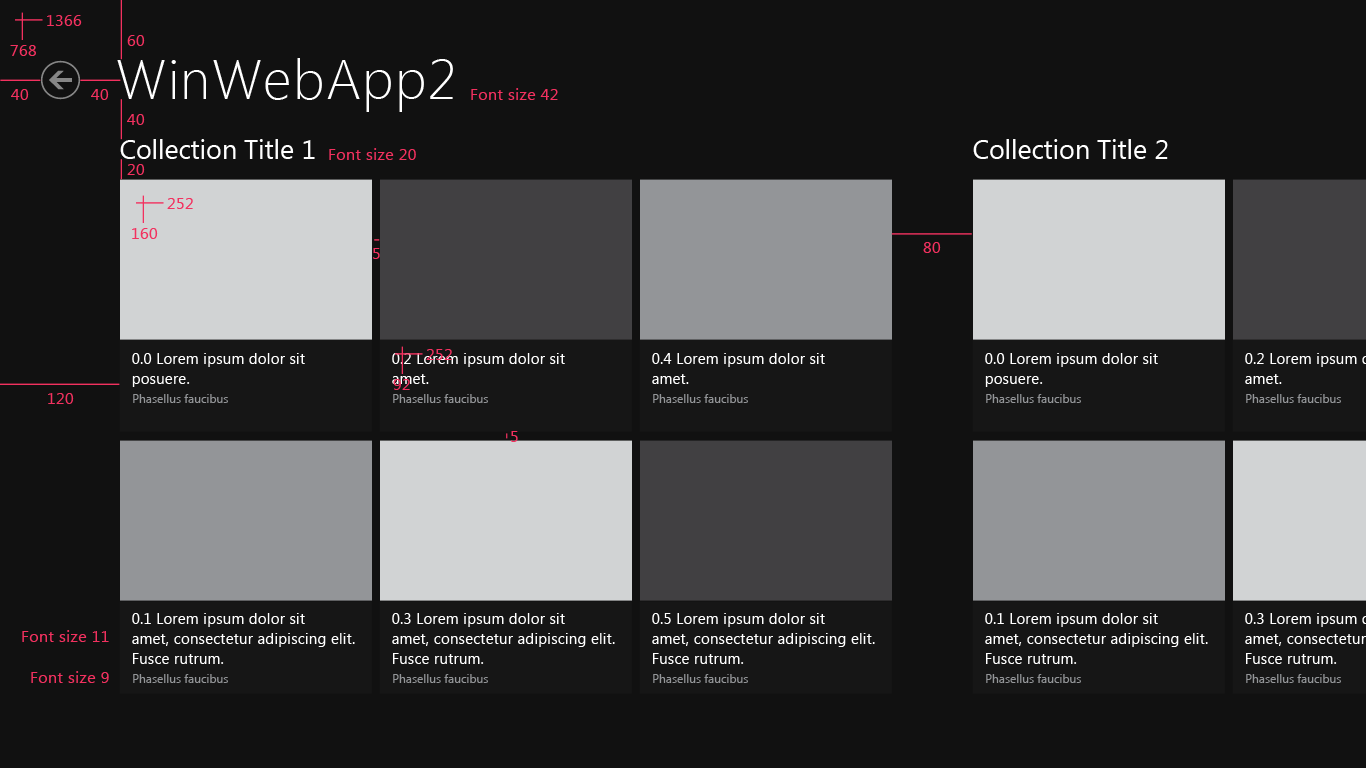
<style>
.page{position:relative;width:1366px;height:768px;background:#111111}
.page>*{position:absolute;margin:0}
.t1{font:16px "SegoeUI";letter-spacing:0.025em;color:#f2315f}
.t2{font:56px "SegoeUI-Light";letter-spacing:0.025em;color:#ffffff}
.t3{font:26.7px "SegoeUI";color:#ffffff}
.t4{font:14.7px/20px "SegoeUI";letter-spacing:0.025em;color:#ffffff}
.t5{font:12px "SegoeUI";color:#939598}
</style>
<div class="page">
<p class="t1" style="left:47px;top:15px;width:35px;height:11px">1366</p>
<p class="t1" style="left:127px;top:35px;width:18px;height:11px">60</p>
<p class="t1" style="left:10px;top:45px;width:26px;height:11px">768</p>
<p class="t2" style="left:117px;top:58px;width:336px;height:54px">WinWebApp2</p>
<p class="t1" style="left:11px;top:89px;width:18px;height:11px">40</p>
<p class="t1" style="left:91px;top:89px;width:18px;height:11px">40</p>
<p class="t1" style="left:471px;top:88px;width:87px;height:12px">Font size 42</p>
<p class="t1" style="left:127px;top:114px;width:18px;height:11px">40</p>
<p class="t3" style="left:120px;top:139px;width:195px;height:20px">Collection Title 1</p>
<p class="t1" style="left:329px;top:148px;width:87px;height:12px">Font size 20</p>
<p class="t3" style="left:973px;top:139px;width:195px;height:20px">Collection Title 2</p>
<p class="t1" style="left:127px;top:164px;width:18px;height:11px">20</p>
<p class="t1" style="left:167px;top:198px;width:26px;height:11px">252</p>
<p class="t1" style="left:132px;top:228px;width:26px;height:11px">160</p>
<p class="t1" style="left:923px;top:242px;width:18px;height:11px">80</p>
<p class="t1" style="left:373px;top:248px;width:7px;height:11px">5</p>
<p class="t4" style="left:132px;top:353px;width:173px;height:34px">0.0 Lorem ipsum dolor sit <br>posuere.</p>
<p class="t4" style="left:392px;top:353px;width:173px;height:31px">0.2 Lorem ipsum dolor sit <br>amet.</p>
<p class="t1" style="left:426px;top:349px;width:26px;height:11px">252</p>
<p class="t4" style="left:652px;top:353px;width:173px;height:31px">0.4 Lorem ipsum dolor sit <br>amet.</p>
<p class="t4" style="left:985px;top:353px;width:173px;height:34px">0.0 Lorem ipsum dolor sit <br>posuere.</p>
<p class="t1" style="left:393px;top:379px;width:17px;height:11px">92</p>
<p class="t1" style="left:48px;top:393px;width:26px;height:11px">120</p>
<p class="t5" style="left:133px;top:394px;width:95px;height:9px">Phasellus faucibus</p>
<p class="t5" style="left:393px;top:394px;width:95px;height:9px">Phasellus faucibus</p>
<p class="t5" style="left:653px;top:394px;width:95px;height:9px">Phasellus faucibus</p>
<p class="t5" style="left:986px;top:394px;width:95px;height:9px">Phasellus faucibus</p>
<p class="t5" style="left:1246px;top:394px;width:95px;height:9px">Phasellus faucibus</p>
<p class="t1" style="left:511px;top:431px;width:7px;height:11px">5</p>
<p class="t4" style="left:132px;top:613px;width:223px;height:51px">0.1 Lorem ipsum dolor sit <br>amet, consectetur adipiscing elit. <br>Fusce rutrum.</p>
<p class="t4" style="left:392px;top:613px;width:223px;height:51px">0.3 Lorem ipsum dolor sit <br>amet, consectetur adipiscing elit. <br>Fusce rutrum.</p>
<p class="t4" style="left:652px;top:613px;width:223px;height:51px">0.5 Lorem ipsum dolor sit <br>amet, consectetur adipiscing elit. <br>Fusce rutrum.</p>
<p class="t4" style="left:985px;top:613px;width:223px;height:51px">0.1 Lorem ipsum dolor sit <br>amet, consectetur adipiscing elit. <br>Fusce rutrum.</p>
<p class="t1" style="left:22px;top:630px;width:87px;height:12px">Font size 11</p>
<p class="t1" style="left:31px;top:671px;width:78px;height:12px">Font size 9</p>
<p class="t5" style="left:133px;top:674px;width:95px;height:9px">Phasellus faucibus</p>
<p class="t5" style="left:393px;top:674px;width:95px;height:9px">Phasellus faucibus</p>
<p class="t5" style="left:653px;top:674px;width:95px;height:9px">Phasellus faucibus</p>
<p class="t5" style="left:986px;top:674px;width:95px;height:9px">Phasellus faucibus</p>
<p class="t5" style="left:1246px;top:674px;width:95px;height:9px">Phasellus faucibus</p>
</div>
